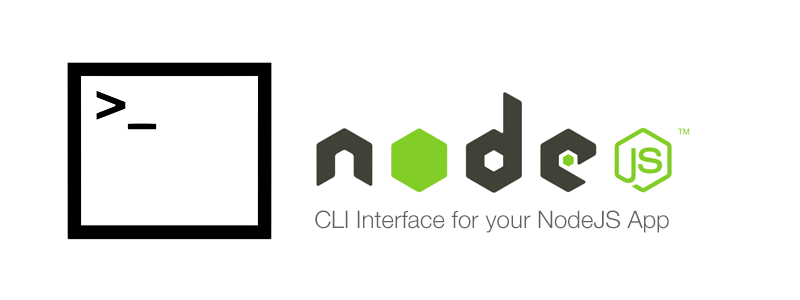
<style>
.page{position:relative;width:800px;height:300px;background:#ffffff}
.page>*{position:absolute;margin:0}
.t1{font:24px "HelveticaNeue-Light";color:#616161}
</style>
<div class="page">
<p class="t1" style="left:315px;top:210px;width:354px;height:23px">CLI Interface for your NodeJS App</p>
</div>
